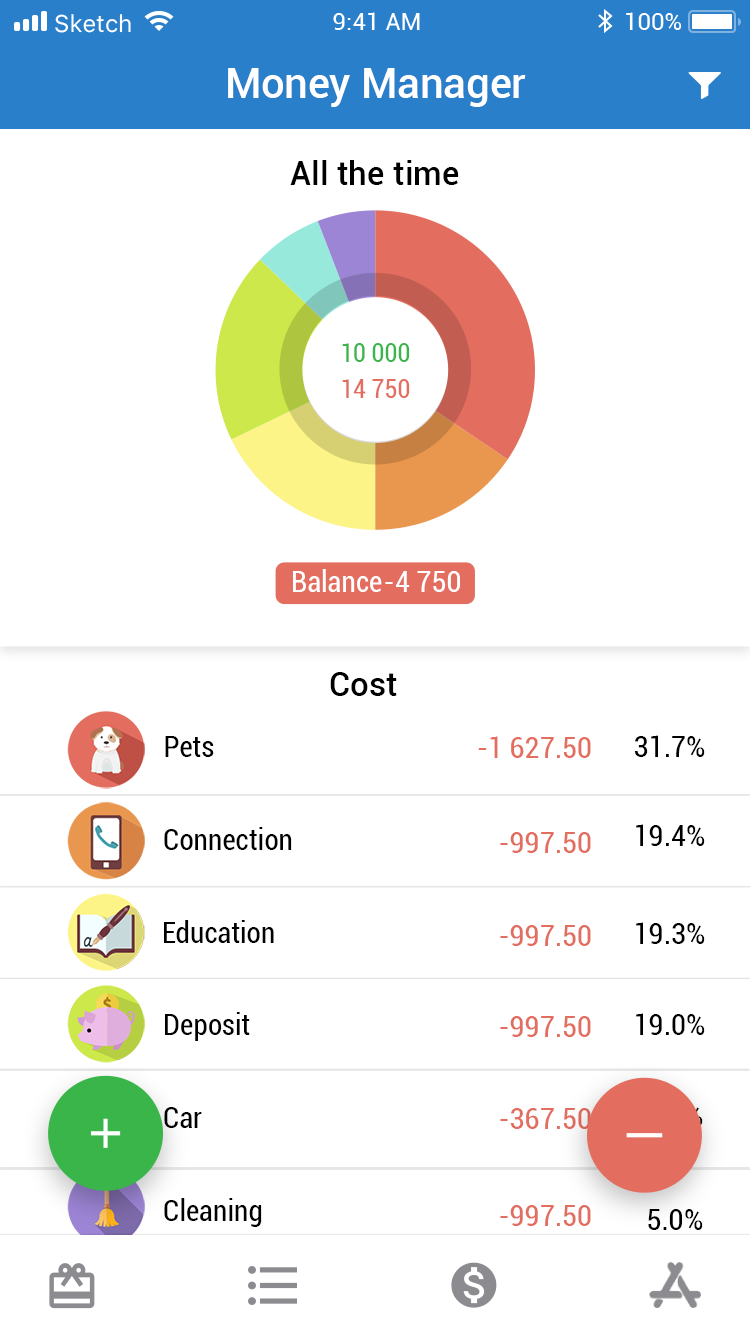
<style>
.page{position:relative;width:750px;height:1336px;background:#ffffff}
.page>*{position:absolute;margin:0}
.t1{font:41.6px "Roboto-Medium";color:#ffffff}
.t2{font:33.4px "Roboto-Medium";color:#000000}
.t3{font:25px "Roboto-Condensed";color:#39b54a}
.t4{font:25px "Roboto-Condensed";color:#e36d5f}
.t5{font:29.2px "Roboto-Condensed";color:#ffffff}
.t6{font:33.3px "Roboto-Medium";color:#000000}
.t7{font:29.2px "Roboto-Condensed";color:#000000}
.t8{font:29.2px "Roboto-Condensed";color:#e36d5f}
</style>
<div class="page">
<p class="t1" style="left:228px;top:68px;width:298px;height:39px">Money Manager</p>
<p class="t2" style="left:290px;top:160px;width:169px;height:25px">All the time</p>
<p class="t3" style="left:342px;top:343px;width:68px;height:19px">10 000</p>
<p class="t4" style="left:342px;top:379px;width:68px;height:19px">14 750</p>
<p class="t5" style="left:293px;top:569px;width:89px;height:23px">Balance</p>
<p class="t5" style="left:385px;top:571px;width:75px;height:21px">-4 750</p>
<p class="t6" style="left:330px;top:672px;width:67px;height:24px">Сost</p>
<p class="t7" style="left:165px;top:736px;width:49px;height:21px">Pets</p>
<p class="t8" style="left:478px;top:736px;width:113px;height:22px">-1 627.50</p>
<p class="t7" style="left:634px;top:735px;width:71px;height:22px">31.7%</p>
<p class="t7" style="left:164px;top:827px;width:128px;height:23px">Connection</p>
<p class="t8" style="left:500px;top:832px;width:91px;height:21px">-997.50</p>
<p class="t7" style="left:636px;top:824px;width:69px;height:22px">19.4%</p>
<p class="t7" style="left:164px;top:920px;width:110px;height:23px">Education</p>
<p class="t8" style="left:500px;top:925px;width:91px;height:21px">-997.50</p>
<p class="t7" style="left:636px;top:922px;width:69px;height:22px">19.3%</p>
<p class="t7" style="left:165px;top:1012px;width:85px;height:29px">Deposit</p>
<p class="t7" style="left:636px;top:1013px;width:69px;height:22px">19.0%</p>
<p class="t8" style="left:500px;top:1016px;width:91px;height:21px">-997.50</p>
<p class="t7" style="left:164px;top:1107px;width:38px;height:21px">Car</p>
<p class="t8" style="left:500px;top:1108px;width:91px;height:21px">-367.50</p>
<p class="t7" style="left:164px;top:1198px;width:98px;height:29px">Cleaning</p>
<p class="t8" style="left:500px;top:1205px;width:91px;height:21px">-997.50</p>
<p class="t7" style="left:648px;top:1209px;width:55px;height:21px">5.0%</p>
</div>
